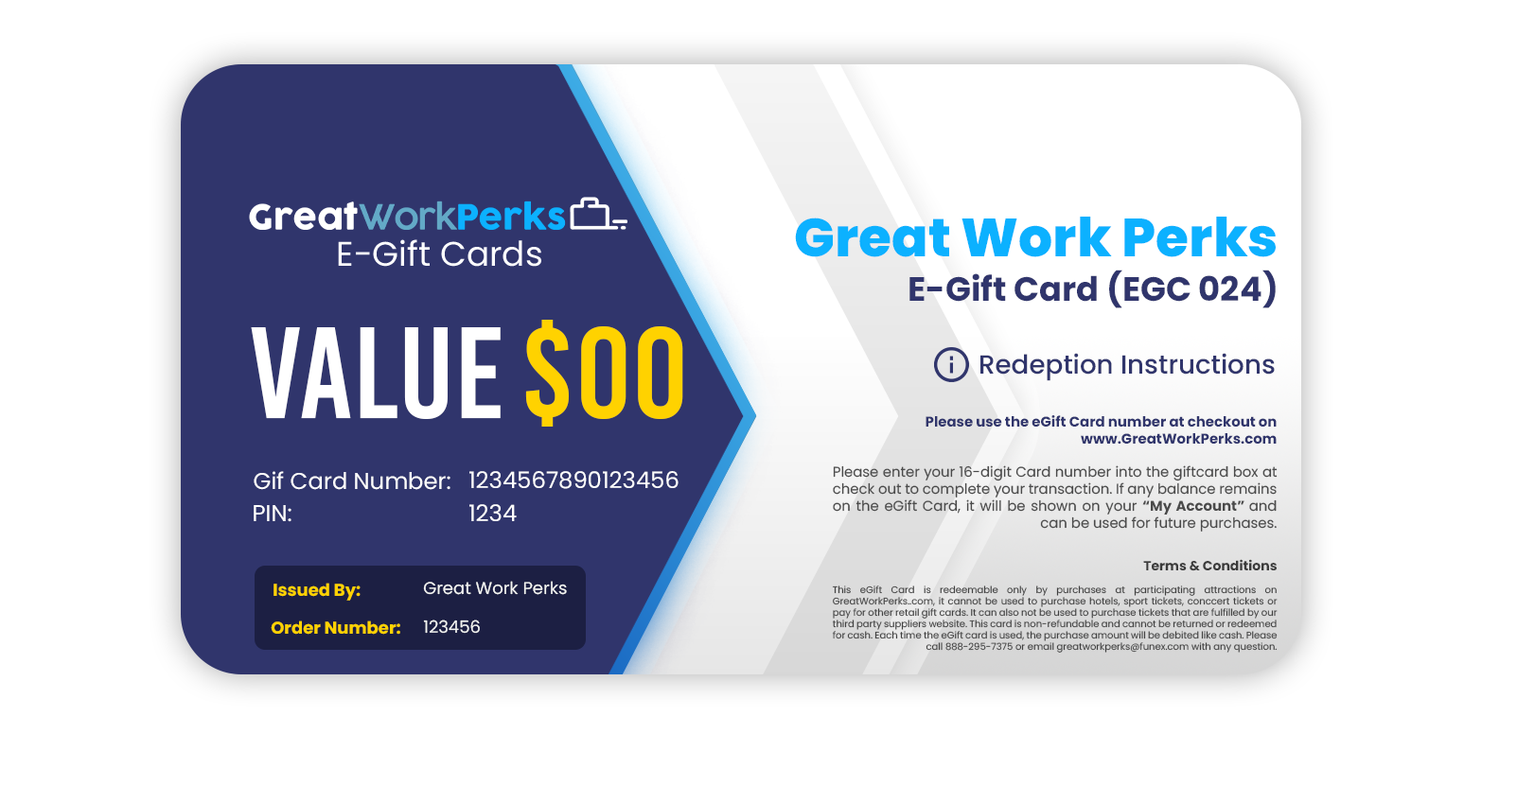
<style>
.page{position:relative;width:1517px;height:786px;background:#ffffff}
.page>*{position:absolute;margin:0}
.t1{font:33.5px/44.7px "Poppins-Bold";color:#30356c}
.t2{font:53.7px/44.7px "Poppins-ExtraBold";color:#0cb1ff}
.t3{font:129.6px "BebasKai";color:#ffffff}
.t4{font:129.6px "BebasKai";color:#ffd200}
.t5{font:26.2px "Poppins-Medium";color:#30356c}
.t6{font:14.1px "Poppins-Regular";color:#4a4a4a}
.t7{font:14.1px "Poppins-Bold";color:#30356c}
.t8{font:14.1px "Poppins-Bold";color:#4a4a4a}
.t9{font:22.9px "Poppins-Regular";color:#ffffff}
.t10{font:13.2px "Poppins-Bold";color:#3b3b3b}
.t11{font:17px "Poppins-Regular";color:#f3f4f3}
.t12{font:17px "Poppins-Bold";color:#ffd200}
.t13{font:9.5px "Poppins-Regular";color:#404040}
</style>
<div class="page">
<p class="t1" style="left:795px;top:217px;width:480px;height:91px;text-align:right"><span class="t2">Great Work Perks<br></span>E-Gift Card (EGC 024)</p>
<p class="t3" style="left:251px;top:327px;width:250px;height:92px">VALUE</p>
<p class="t4" style="left:525px;top:320px;width:158px;height:107px">$00</p>
<p class="t5" style="left:980px;top:353px;width:294px;height:28px">Redeption Instructions</p>
<p class="t6" style="left:833px;top:415px;width:444px;height:117px;text-align:right"><span class="t7">Please use the eGift Card number at checkout on www.GreatWorkPerks.com<br></span><br>Please enter your 16-digit Card number into the giftcard box at check out to complete your transaction. If any balance remains on the eGift Card, it will be shown on your <span class="t8">“My Account” </span>and can be used for future purchases.</p>
<p class="t9" style="left:254px;top:471px;width:196px;height:19px">Gif Card Number:</p>
<p class="t9" style="left:469px;top:471px;width:209px;height:18px">1234567890123456</p>
<p class="t9" style="left:254px;top:505px;width:37px;height:17px">PIN:</p>
<p class="t9" style="left:469px;top:504px;width:48px;height:17px">1234</p>
<p class="t10" style="left:1143px;top:559px;width:133px;height:12px">Terms &amp; Conditions</p>
<p class="t11" style="left:423px;top:581px;width:144px;height:14px">Great Work Perks</p>
<p class="t12" style="left:273px;top:583px;width:87px;height:18px">Issued By:</p>
<p class="t13" style="left:832px;top:586px;width:445px;height:67px;text-align:justify">This eGift Card is redeemable only by purchases at participating attractions on GreatWorkPerks..com, it cannot be used to purchase hotels, sport tickets, conccert tickets or pay for other retail gift cards. It can also not be used to purchase tickets that are fulfilled by our third party suppliers website. This card is non-refundable and cannot be returned or redeemed for cash. Each time the eGift card is used, the purchase amount will be debited like cash. Please call 888-295-7375 or email greatworkperks@funex.com with any question.</p>
<p class="t12" style="left:271px;top:621px;width:129px;height:14px">Order Number:</p>
<p class="t11" style="left:423px;top:620px;width:57px;height:14px">123456</p>
</div>
